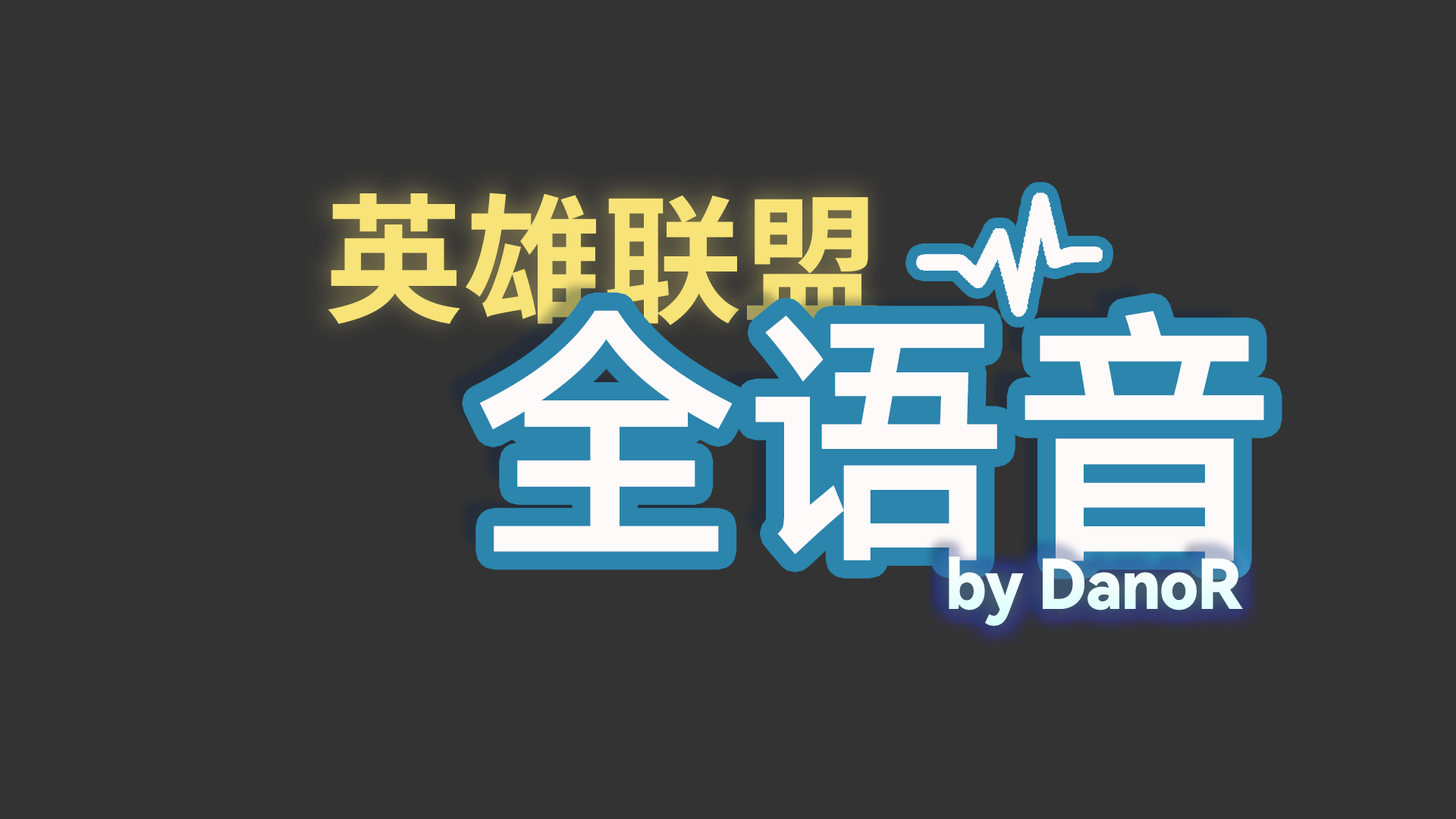
<style>
.page{position:relative;width:1456px;height:819px;background:#333333}
.page>*{position:absolute;margin:0}
.t1{font:139.3px "SourceHanMonoSC-Bold";color:#f7e377}
.t2{font:273.2px "Alibaba-PuHuiTi-M";color:#fffafa}
.t3{font:68.6px "HarmonyOS_Sans_SC_Black";letter-spacing:-0.02em;color:#fffafa;scale:0.94 1}
</style>
<div class="page">
<p class="t1" style="left:328px;top:193px;width:549px;height:132px">英雄联盟</p>
<p class="t2" style="left:480px;top:310px;width:784px;height:251px">全语音</p>
<p class="t3" style="left:949px;top:557px;width:294px;height:69px">by DanoR</p>
</div>
